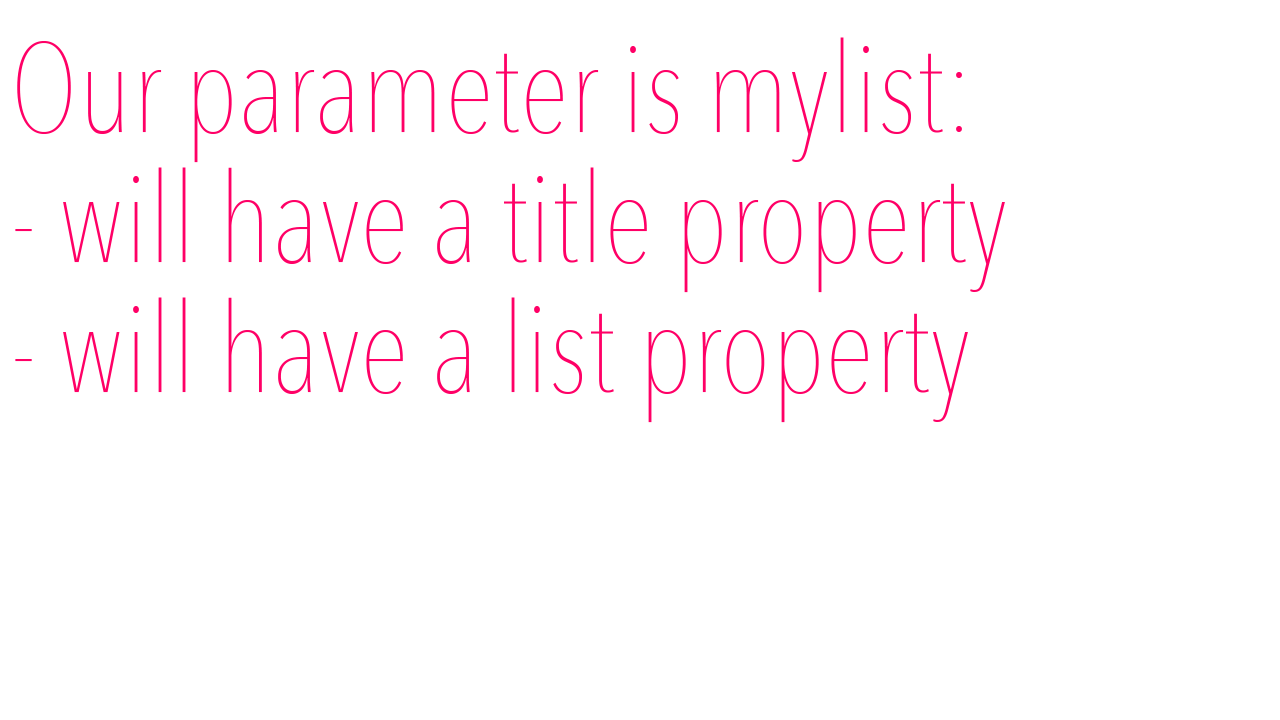
<style>
.page{position:relative;width:1280px;height:720px;background:#ffffff}
.page>*{position:absolute;margin:0}
.t1{font:125px "AvenirNextCondensed-UltraLight";color:#ff0066}
</style>
<div class="page">
<p class="t1" style="left:15px;top:37px;width:990px;height:386px">Our parameter is mylist:<br>- will have a title property<br>- will have a list property</p>
</div>
